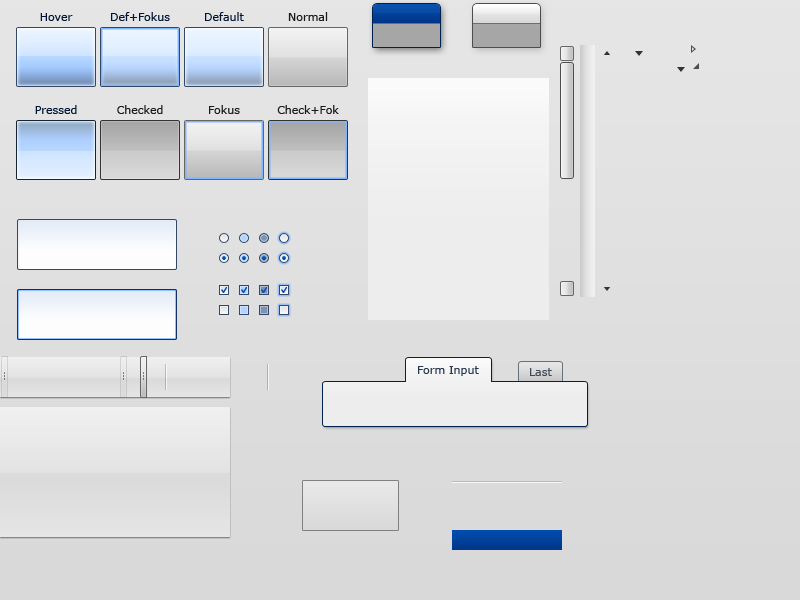
<style>
.page{position:relative;width:800px;height:600px}
.page>*{position:absolute;margin:0}
.t1{font:11px "Verdana";color:#001533}
.t2{font:11px "Verdana";color:#1a1a1a}
.t3{font:11px "Verdana";color:#26364d}
.t4{font:11px "Verdana";color:#3f4854}
</style>
<div class="page">
<p class="t1" style="left:40px;top:13px;width:33px;height:8px">Hover</p>
<p class="t1" style="left:111px;top:12px;width:59px;height:9px">Def+Fokus</p>
<p class="t1" style="left:205px;top:12px;width:39px;height:9px">Default</p>
<p class="t2" style="left:288px;top:12px;width:40px;height:9px">Normal</p>
<p class="t1" style="left:35px;top:105px;width:42px;height:9px">Pressed</p>
<p class="t2" style="left:117px;top:105px;width:46px;height:9px">Checked</p>
<p class="t2" style="left:209px;top:105px;width:31px;height:9px">Fokus</p>
<p class="t2" style="left:277px;top:105px;width:62px;height:9px">Check+Fok</p>
<p class="t3" style="left:418px;top:366px;width:61px;height:10px">Form Input</p>
<p class="t4" style="left:530px;top:368px;width:22px;height:8px">Last</p>
</div>
